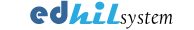
<style>
.page{position:relative;width:194px;height:30px;background:#ffffff}
.page>*{position:absolute;margin:0}
.t1{font:34.4px "Bauhaus93";letter-spacing:0.02em;color:#346699}
.t2{font:34.4px "Magneto-Bold";letter-spacing:0.02em;color:#29aae1}
.t3{font:21.7px "CalifornianFB-Italic";letter-spacing:0.02em;color:#000000}
</style>
<div class="page">
<p class="t1" style="left:30px;top:0px;width:38px;height:24px">ed</p>
<p class="t2" style="left:69px;top:1px;width:52px;height:23px">hil</p>
<p class="t3" style="left:120px;top:12px;width:53px;height:17px">system</p>
</div>
